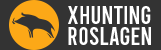
<style>
.page{position:relative;width:161px;height:50px;background:#333333}
.page>*{position:absolute;margin:0}
.t1{font:25.3px "Bebas-Regular";color:#ffffff}
.t2{font:25.2px "Bebas-Regular";color:#ffffff}
</style>
<div class="page">
<p class="t1" style="left:68px;top:6px;width:83px;height:18px">XHUNTING</p>
<p class="t2" style="left:68px;top:27px;width:83px;height:18px">ROSLAGEN</p>
</div>
